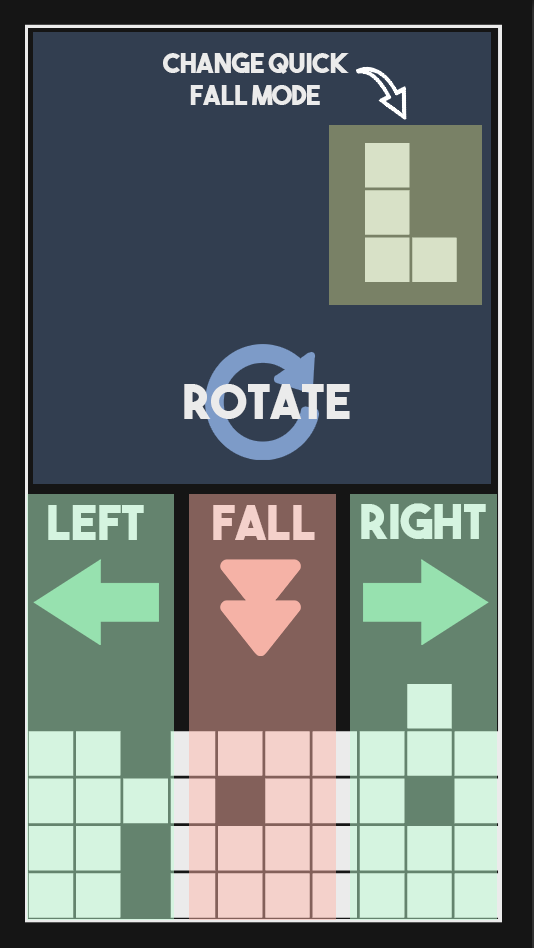
<style>
.page{position:relative;width:534px;height:948px;background:#323e50}
.page>*{position:absolute;margin:0}
.t1{font:26.7px "TheBoldFont";color:#ebebeb}
.t2{font:48px "TheBoldFont";color:#ebebeb}
.t3{font:48px "TheBoldFont";color:#f4d1cb}
</style>
<div class="page">
<p class="t1" style="left:163px;top:52px;width:186px;height:53px;text-align:center">change quick<br>fall mode</p>
<p class="t2" style="left:184px;top:384px;width:166px;height:35px">rotate</p>
<p class="t2" style="left:48px;top:505px;width:96px;height:35px">Left</p>
<p class="t3" style="left:213px;top:505px;width:102px;height:35px">Fall</p>
<p class="t2" style="left:361px;top:503px;width:125px;height:36px">Right</p>
</div>
